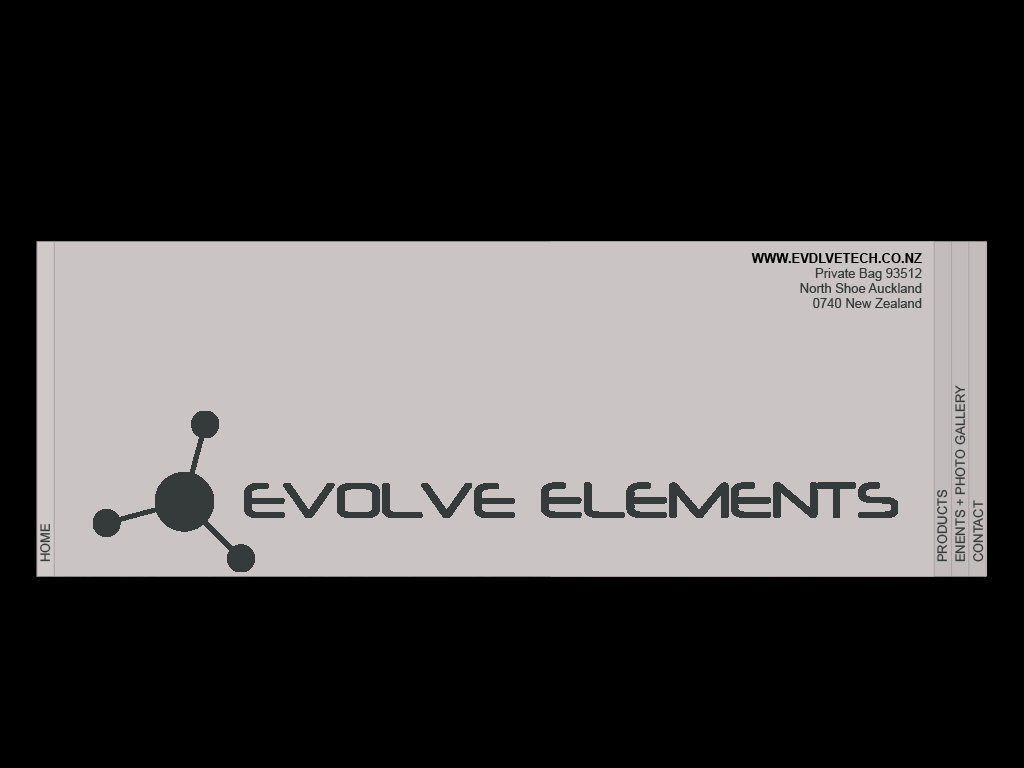
<style>
.page{position:relative;width:1024px;height:768px;background:#000000}
.page>*{position:absolute;margin:0}
.t1{font:13px/15px "ArialMT";color:#353b3b}
.t2{font:13px/15px "Arial-BoldMT";color:#000000}
.t3{font:13px/18px "ArialMT";color:#353b3b}
.t4{font:13px "ArialMT";color:#353b3b}
</style>
<div class="page">
<p class="t1" style="left:751px;top:253px;width:171px;height:55px;text-align:right"><span class="t2">WWW.EVDLVETECH.CO.NZ<br></span>Private Bag 93512<br>North Shoe Auckland<br>0740 New Zealand</p>
<p class="t3" style="left:937px;top:385px;width:47px;height:177px;rotate:-90deg">PRODUCTS<br>ENENTS + PHOTO GALLERY<br>CONTACT</p>
<p class="t4" style="left:40px;top:523px;width:11px;height:39px;rotate:-90deg">HOME</p>
</div>
